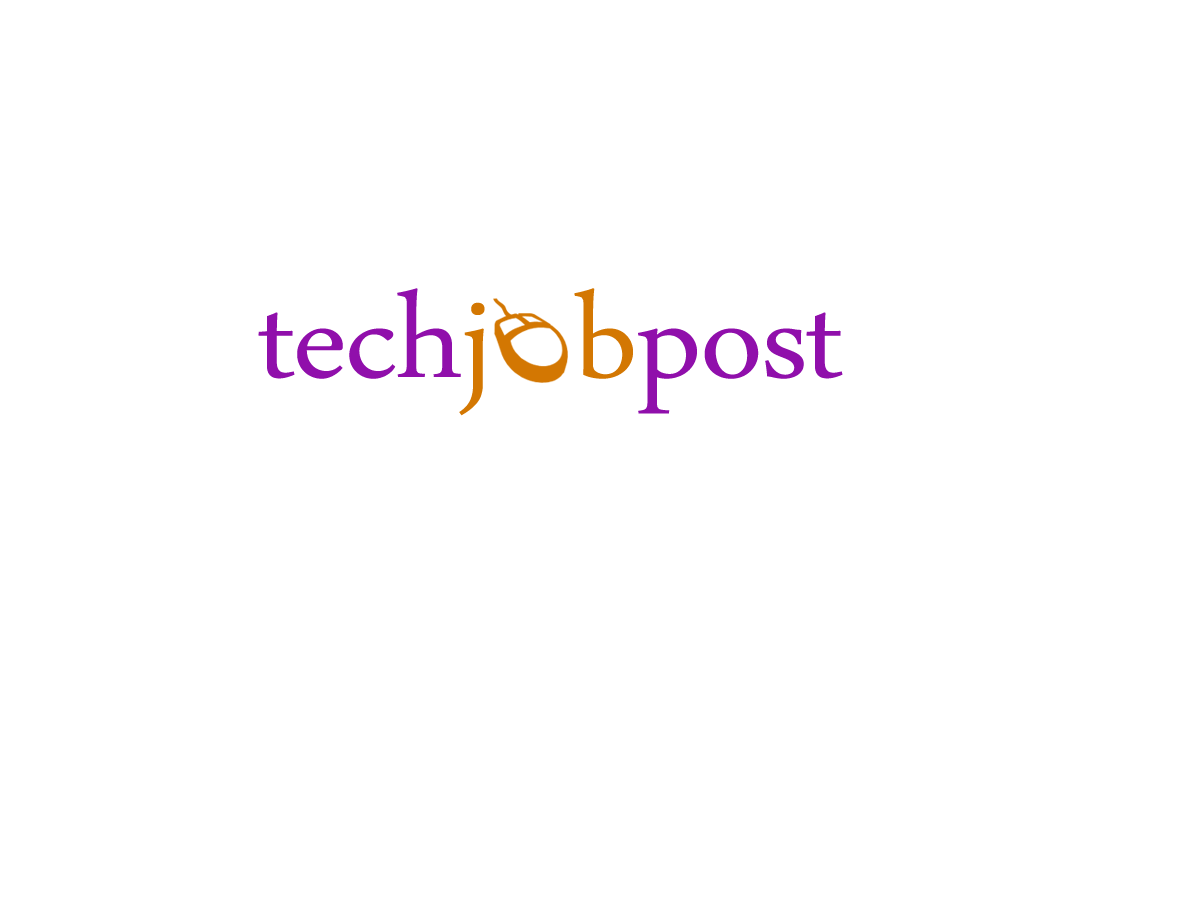
<style>
.page{position:relative;width:1200px;height:900px;background:#ffffff}
.page>*{position:absolute;margin:0}
.t1{font:168.3px "DaunPenh";letter-spacing:-0.01em;color:#900fab;scale:1.07 1}
.t2{font:168.3px "DaunPenh";letter-spacing:-0.01em;color:#d37702;scale:1.07 1}
</style>
<div class="page">
<p class="t1" style="left:258px;top:288px;width:585px;height:128px">tech<span class="t2">j  b</span>post</p>
</div>
